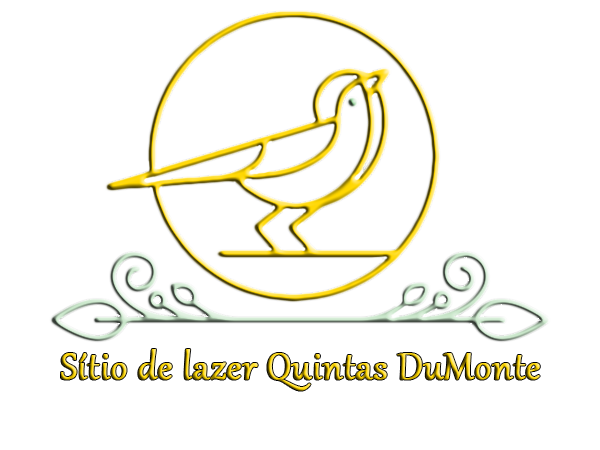
<style>
.page{position:relative;width:600px;height:450px;background:#ffffff}
.page>*{position:absolute;margin:0}
.t1{font:46px "Gabriola";font-weight:bold}
</style>
<div class="page">
<p class="t1" style="left:61px;top:349px;width:479px;height:42px">Sítio de lazer Quintas DuMonte</p>
</div>
